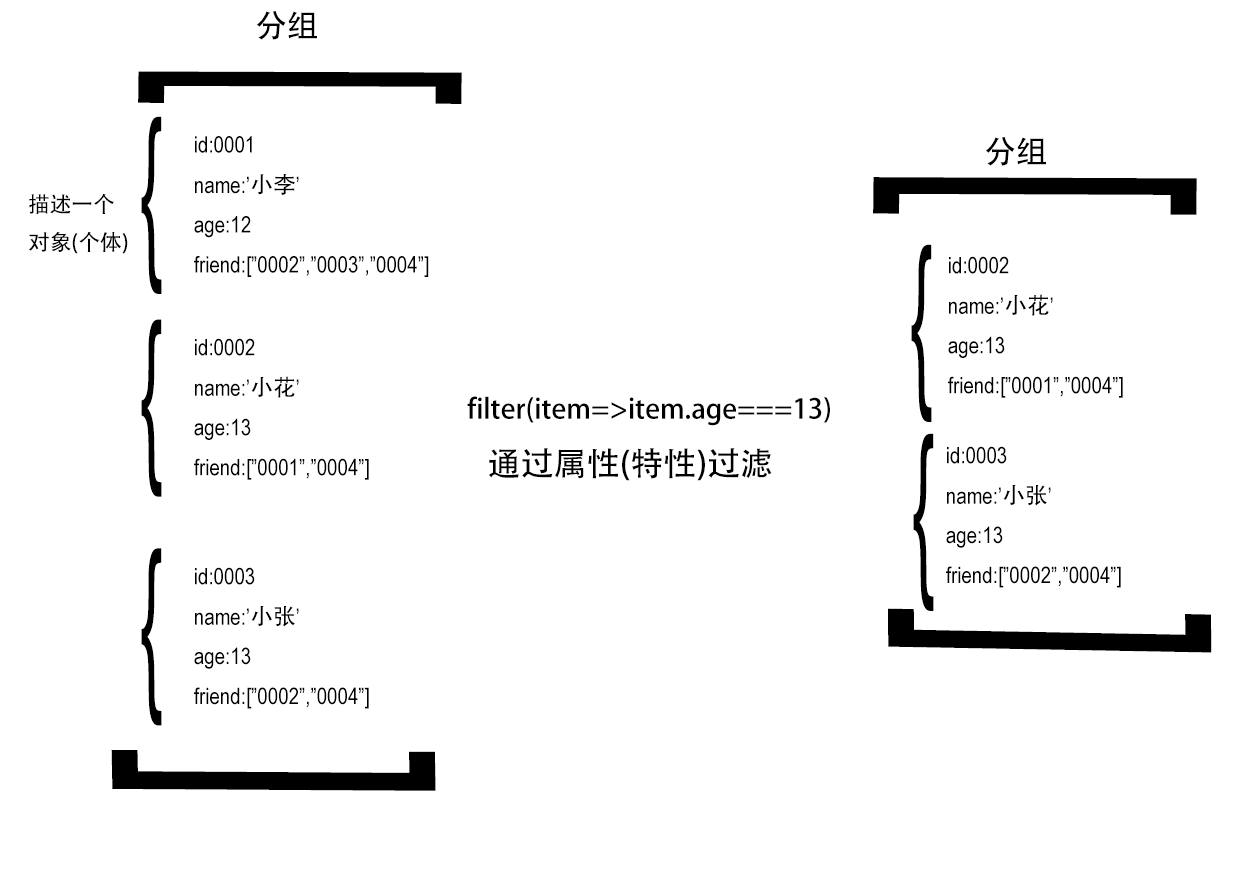
<style>
.page{position:relative;width:1250px;height:875px;background:#ffffff}
.page>*{position:absolute;margin:0}
.t1{font:31.6px "AdobeHeitiStd-Regular";color:#000000}
.t2{font:353.2px "ArialNarrow";color:#000000;scale:0.55 1}
.t3{font:188.9px "ArialNarrow";color:#000000;scale:0.45 1}
.t4{font:22.8px "ArialNarrow";color:#000000}
.t5{font:22.8px "AdobeHeitiStd-Regular";color:#000000}
.t6{font:353.2px "ArialNarrow";color:#000000;scale:0.64 1}
.t7{font:21.7px "AdobeHeitiStd-Regular";color:#000000}
.t8{font:27.3px "AdobeHeitiStd-Regular";color:#000000}
.t9{font:33px "AdobeHeitiStd-Regular";color:#000000}
.t10{font:353.2px "ArialNarrow";color:#000000;scale:0.67 1}
.t11{font:353.2px "ArialNarrow";color:#000000;scale:0.69 1}
</style>
<div class="page">
<p class="t1" style="left:256px;top:11px;width:61px;height:29px">分组</p>
<p class="t2" style="left:138px;top:71px;width:324px;height:33px;rotate:-89deg">]</p>
<p class="t3" style="left:141px;top:116px;width:21px;height:178px">{</p>
<p class="t4" style="left:194px;top:136px;width:235px;height:141px">id:0001<br>name:’<span class="t5">小李</span>’<br>age:12<br>friend:[”0002”,”0003”,”0004”]</p>
<p class="t1" style="left:985px;top:137px;width:61px;height:29px">分组</p>
<p class="t6" style="left:873px;top:177px;width:324px;height:38px;rotate:-89deg">]</p>
<p class="t7" style="left:29px;top:193px;width:99px;height:61px">描述一个<br>对象(个体)</p>
<p class="t3" style="left:911px;top:244px;width:21px;height:178px">{</p>
<p class="t4" style="left:948px;top:256px;width:175px;height:142px">id:0002<br>name:’<span class="t5">小花</span>’<br>age:13<br>friend:[”0001”,”0004”]</p>
<p class="t3" style="left:141px;top:319px;width:21px;height:178px">{</p>
<p class="t4" style="left:194px;top:338px;width:175px;height:142px">id:0002<br>name:’<span class="t5">小花</span>’<br>age:13<br>friend:[”0001”,”0004”]</p>
<p class="t8" style="left:467px;top:396px;width:363px;height:30px">filter(item=&gt;item.age===13)</p>
<p class="t3" style="left:913px;top:433px;width:21px;height:178px">{</p>
<p class="t9" style="left:489px;top:448px;width:283px;height:33px">通过属性(特性)过滤</p>
<p class="t4" style="left:946px;top:446px;width:175px;height:142px">id:0003<br>name:’<span class="t5">小张</span>’<br>age:13<br>friend:[”0002”,”0004”]</p>
<p class="t3" style="left:141px;top:548px;width:21px;height:178px">{</p>
<p class="t4" style="left:194px;top:567px;width:175px;height:142px">id:0003<br>name:’<span class="t5">小张</span>’<br>age:13<br>friend:[”0002”,”0004”]</p>
<p class="t10" style="left:888px;top:608px;width:324px;height:45px;rotate:90deg">]</p>
<p class="t11" style="left:111px;top:750px;width:325px;height:41px;rotate:89deg">]</p>
</div>
